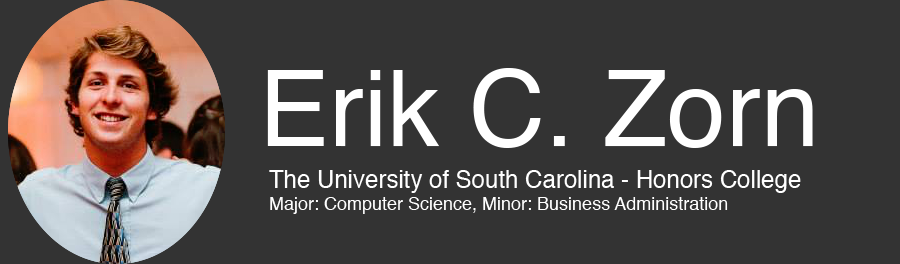
<style>
.page{position:relative;width:900px;height:264px;background:#333333}
.page>*{position:absolute;margin:0}
.t1{font:105px "Helvetica";color:#ffffff}
.t2{font:18px "Helvetica";color:#ffffff}
.t3{font:24px "Helvetica";color:#ffffff}
</style>
<div class="page">
<p class="t1" style="left:267px;top:68px;width:546px;height:80px">Erik C. Zorn</p>
<p class="t2" style="left:269px;top:170px;width:532px;height:44px"><span class="t3">The University of South Carolina - Honors College<br></span>Major: Computer Science, Minor: Business Administration</p>
</div>
